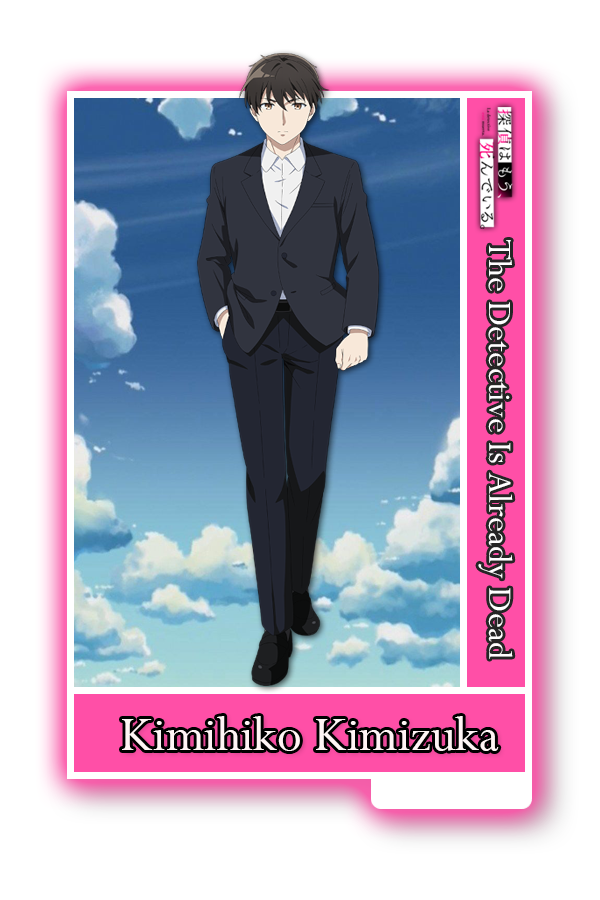
<style>
.page{position:relative;width:600px;height:900px;background:#ffffff}
.page>*{position:absolute;margin:0}
.t1{font:36.5px "Perpetua";color:#ffffff;scale:1.04 1}
.t2{font:54.2px "Perpetua";color:#fff5f5}
</style>
<div class="page">
<p class="t1" style="left:478px;top:240px;width:35px;height:419px;rotate:90deg">The Detective Is Already Dead</p>
<p class="t2" style="left:122px;top:716px;width:377px;height:35px">Kimihiko Kimizuka</p>
</div>
